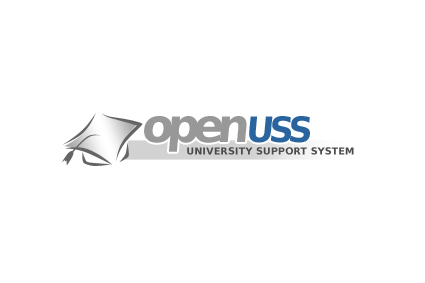
<style>
.page{position:relative;width:425px;height:283px;background:#ffffff}
.page>*{position:absolute;margin:0}
.t1{font:46.9px "BitstreamVeraSans-Bold";letter-spacing:-0.15em;color:#989898}
.t2{font:46.9px "BitstreamVeraSans-Bold";letter-spacing:-0.08em;color:#989898}
.t3{font:35.2px "BitstreamVeraSans-Bold";letter-spacing:-0.14em;color:#2a649f}
.t4{font:35.2px "BitstreamVeraSans-Bold";letter-spacing:-0.12em;color:#2a649f}
.t5{font:9.4px "BitstreamVeraSans-Bold";letter-spacing:0.025em;color:#4a4a4a}
</style>
<div class="page">
<p class="t1" style="left:144px;top:116px;width:166px;height:36px">ope<span class="t2">n</span><span class="t3">U</span><span class="t4">SS</span></p>
<p class="t5" style="left:187px;top:147px;width:167px;height:8px">UNIVERSITY SUPPORT SYSTEM</p>
</div>
